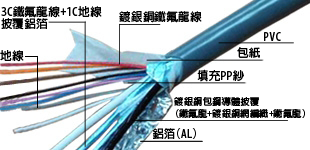
<style>
.page{position:relative;width:310px;height:150px;background:#ffffff}
.page>*{position:absolute;margin:0}
.t1{font:11.5px/12px "AdobeFanHeitiStd-Bold";letter-spacing:0.025em;color:#000000}
.t2{font:11.5px "AdobeFanHeitiStd-Bold";letter-spacing:0.025em;color:#000000}
.t3{font:9.2px/12px "AdobeFanHeitiStd-Bold";letter-spacing:0.025em;color:#000000}
.t4{font:11.5px "AdobeFanHeitiStd-Bold";color:#000000}
</style>
<div class="page">
<p class="t1" style="left:1px;top:6px;width:101px;height:24px">3C鐵氟龍線+1C地線<br>披覆鋁箔</p>
<p class="t2" style="left:119px;top:11px;width:83px;height:12px">鍍銀銅鐵氟龍線</p>
<p class="t2" style="left:264px;top:32px;width:17px;height:9px">PVC</p>
<p class="t2" style="left:0px;top:50px;width:24px;height:12px">地線</p>
<p class="t2" style="left:237px;top:47px;width:23px;height:11px">包紙</p>
<p class="t2" style="left:197px;top:69px;width:47px;height:13px">填充PP紗</p>
<p class="t3" style="left:174px;top:97px;width:131px;height:21px">鍍銀銅包鋼導體披覆<br>(鐵氟龍+鍍銀銅網編織+鐵氟龍)</p>
<p class="t4" style="left:152px;top:128px;width:44px;height:11px">鋁箔(AL)</p>
</div>
